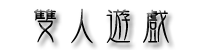
<style>
.page{position:relative;width:200px;height:50px;background:#ffffff}
.page>*{position:absolute;margin:0}
.t1{font:36px "DFJinWen-W3-WIN-BF";color:#000000;font-weight:bold}
</style>
<div class="page">
<p class="t1" style="left:34px;top:8px;width:135px;height:36px">雙人遊戲</p>
</div>
